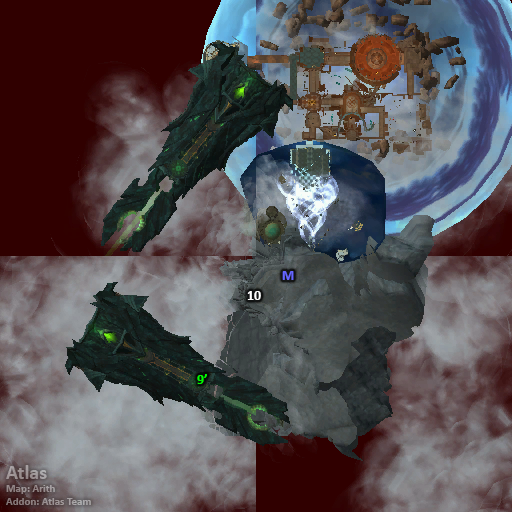
<style>
.page{position:relative;width:512px;height:512px}
.page>*{position:absolute;margin:0}
.t1{font:14px "Calibri-Bold";color:#6666ff}
.t2{font:14px "Calibri-Bold";color:#ffffff}
.t3{font:14px "Calibri-Bold";color:#00ff00}
.t4{font:11px "Calibri-Bold";color:#9f9496}
.t5{font:20px "Calibri-Bold";color:#9f9496}
</style>
<div class="page">
<p class="t1" style="left:282px;top:271px;width:12px;height:9px">M</p>
<p class="t2" style="left:247px;top:291px;width:14px;height:9px">10</p>
<p class="t3" style="left:197px;top:374px;width:10px;height:10px">9’</p>
<p class="t4" style="left:6px;top:465px;width:85px;height:40px"><span class="t5">Atlas<br></span>Map: Arith<br>Addon: Atlas Team</p>
</div>
